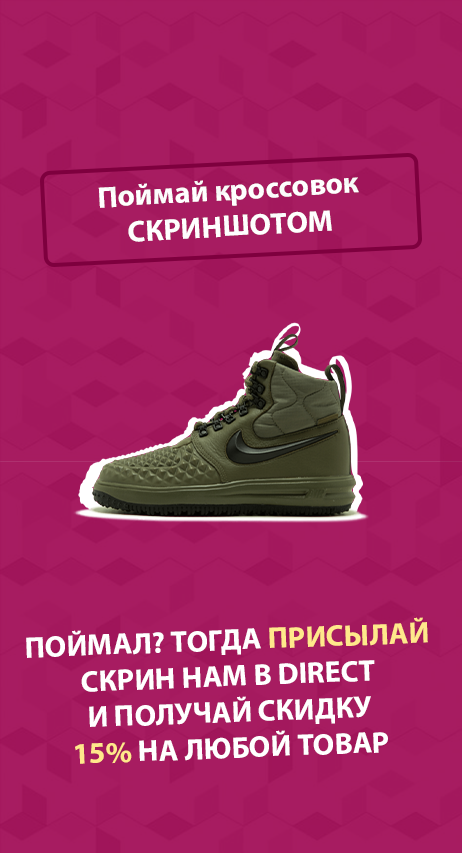
<style>
.page{position:relative;width:462px;height:853px;background:#a71c61}
.page>*{position:absolute;margin:0}
.t1{font:30px "MyriadPro-Bold";color:#ffffff}
.t2{font:30px "MyriadPro-Bold";color:#ffe88b}
</style>
<div class="page">
<p class="t1" style="left:98px;top:177px;width:261px;height:65px;text-align:center;rotate:-3deg">Поймай кроссовок<br>СКРИНШОТОМ</p>
<p class="t1" style="left:26px;top:617px;width:402px;height:147px;text-align:center;rotate:-2deg">ПОЙМАЛ? ТОГДА <span class="t2">ПРИСЫЛАЙ<br></span>СКРИН НАМ В DIRECT<br>И ПОЛУЧАЙ СКИДКУ<br><span class="t2">15% </span>НА ЛЮБОЙ ТОВАР</p>
</div>
